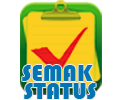
<style>
.page{position:relative;width:120px;height:100px;background:#ffffff}
.page>*{position:absolute;margin:0}
.t1{font:24px/18px "Bauhaus93";color:#0375b4}
</style>
<div class="page">
<p class="t1" style="left:22px;top:65px;width:74px;height:34px;text-align:center">SEMAK <br>STATUS</p>
</div>
